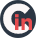
<style>
.page{position:relative;width:36px;height:38px;background:#2b3643}
.page>*{position:absolute;margin:0}
.t1{font:53.8px "Gotham-Bold";color:#fbf7f7}
.t2{font:21.4px "Gotham-Bold";color:#e74d4f}
</style>
<div class="page">
<p class="t1" style="left:3px;top:3px;width:27px;height:31px">c</p>
<p class="t2" style="left:15px;top:14px;width:17px;height:16px">in</p>
</div>
